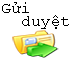
<style>
.page{position:relative;width:71px;height:58px;background:#ffffff}
.page>*{position:absolute;margin:0}
.t1{font:12px/13.3px "CourierNewPSMT";color:#000000}
</style>
<div class="page">
<p class="t1" style="left:2px;top:2px;width:67px;height:27px">Gửi <br>  duyệt</p>
</div>
